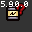
<style>
.page{position:relative;width:32px;height:32px;background:#333333}
.page>*{position:absolute;margin:0}
.t1{font:9px "Consolas";letter-spacing:-0.038em;color:#ffffff}
.t2{font:9px "Consolas";letter-spacing:0.1em;color:#ffffff}
</style>
<div class="page">
<p class="t1" style="left:1px;top:1px;width:27px;height:6px">5.<span class="t2">9</span>0.0</p>
</div>
